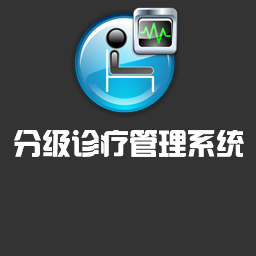
<style>
.page{position:relative;width:256px;height:256px;background:#333333}
.page>*{position:absolute;margin:0}
.t1{font:29px "hzgb";color:#ffffff}
</style>
<div class="page">
<p class="t1" style="left:14px;top:130px;width:230px;height:27px">分级诊疗管理系统</p>
</div>
